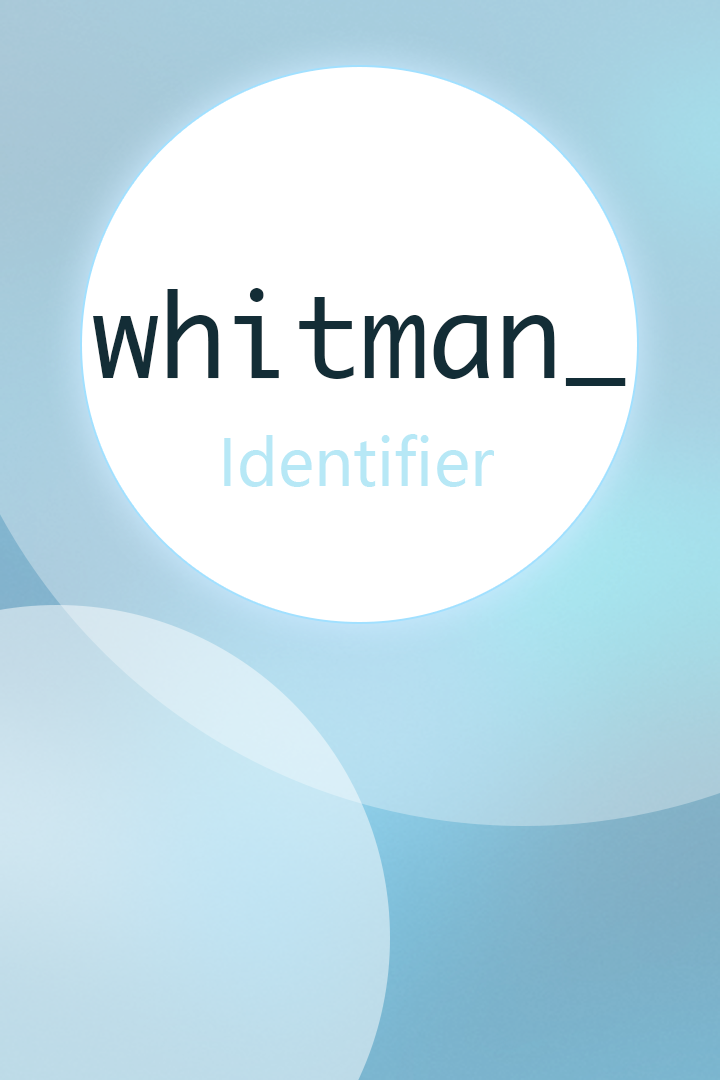
<style>
.page{position:relative;width:720px;height:1080px;background:#ffffff}
.page>*{position:absolute;margin:0}
.t1{font:112px "Monaco";color:#132d36}
.t2{font:64px "MicrosoftYaHei";color:#b7e8f6}
</style>
<div class="page">
<p class="t1" style="left:93px;top:288px;width:533px;height:98px">whitman_</p>
<p class="t2" style="left:224px;top:434px;width:270px;height:53px">Identifier</p>
</div>
